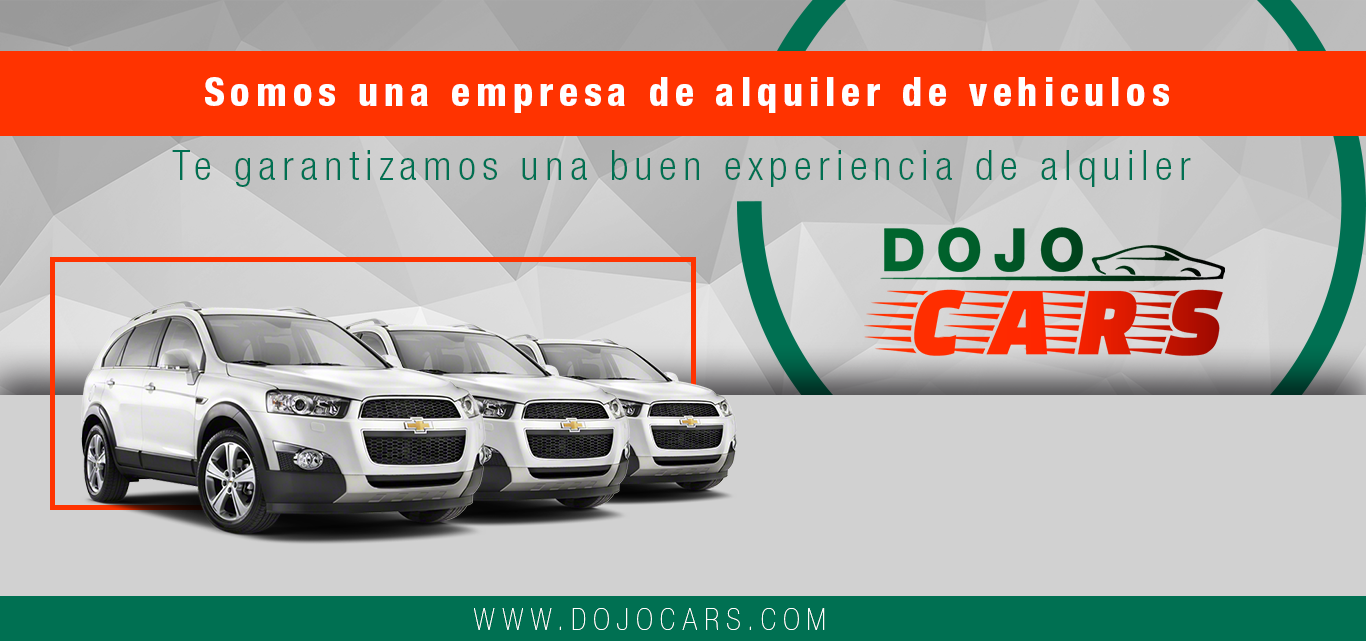
<style>
.page{position:relative;width:1366px;height:641px;background:#d1d1d1}
.page>*{position:absolute;margin:0}
.t1{font:39px "HelveticaNeueLTStd-HvCn";letter-spacing:0.15em;color:#ffffff}
.t2{font:41.3px "HelveticaNeueLTStd-LtCn";letter-spacing:0.15em;color:#007052}
.t3{font:30px "HelveticaNeueLTStd-UltLtCn";letter-spacing:0.25em;color:#ffffff;text-transform:uppercase}
</style>
<div class="page">
<p class="t1" style="left:205px;top:77px;width:964px;height:36px">Somos una empresa de alquiler de vehiculos</p>
<p class="t2" style="left:172px;top:150px;width:1019px;height:37px">Te garantizamos una buen experiencia de alquiler</p>
<p class="t3" style="left:474px;top:608px;width:351px;height:22px">www.dojocars.com</p>
</div>
